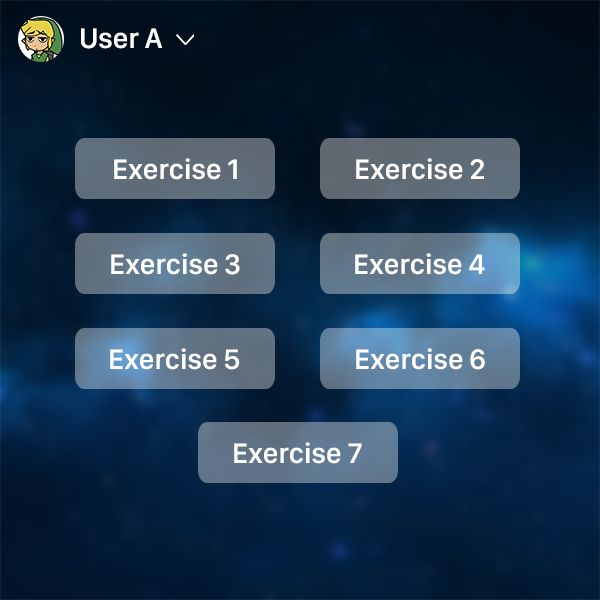
<style>
.page{position:relative;width:600px;height:600px}
.page>*{position:absolute;margin:0}
.t1{font:29.2px "SanFranciscoDisplay-Semibold";color:#ffffff}
</style>
<div class="page">
<p class="t1" style="left:81px;top:28px;width:82px;height:21px">User A</p>
<p class="t1" style="left:114px;top:158px;width:123px;height:22px">Exercise 1</p>
<p class="t1" style="left:356px;top:158px;width:128px;height:22px">Exercise 2</p>
<p class="t1" style="left:111px;top:253px;width:129px;height:22px">Exercise 3</p>
<p class="t1" style="left:355px;top:253px;width:130px;height:22px">Exercise 4</p>
<p class="t1" style="left:110px;top:348px;width:130px;height:22px">Exercise 5</p>
<p class="t1" style="left:356px;top:348px;width:129px;height:22px">Exercise 6</p>
<p class="t1" style="left:234px;top:442px;width:128px;height:22px">Exercise 7</p>
</div>
